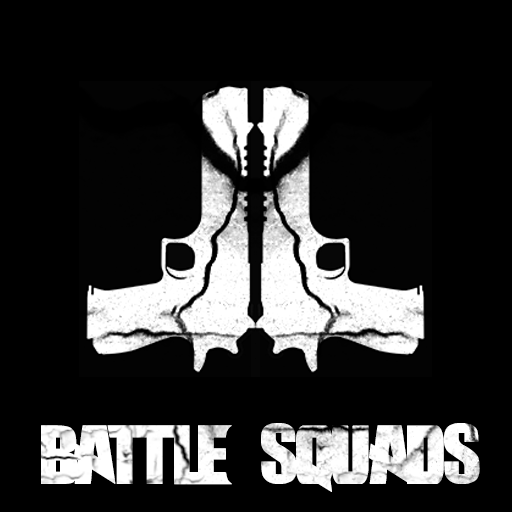
<style>
.page{position:relative;width:512px;height:512px;background:#000000}
.page>*{position:absolute;margin:0}
.t1{font:108.2px "Battleground";letter-spacing:-0.025em;color:#ffffff;text-transform:uppercase}
</style>
<div class="page">
<p class="t1" style="left:41px;top:423px;width:439px;height:69px">battle squads</p>
</div>
